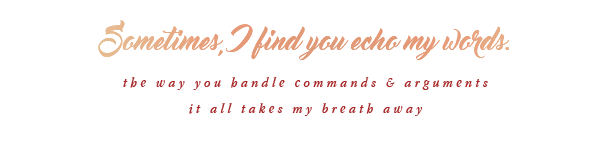
<style>
.page{position:relative;width:600px;height:150px;background:#ffffff}
.page>*{position:absolute;margin:0}
.t1{font:27.1px "MasterOfBreak";color:#e0a886}
.t2{font:14px/26.5px "AppleGaramond-Italic";letter-spacing:0.26em;color:#a82a2a}
</style>
<div class="page">
<p class="t1" style="left:98px;top:20px;width:411px;height:40px">Sometimes, I find you echo my words.</p>
<p class="t1" style="left:98px;top:20px;width:411px;height:40px">Sometimes, I find you echo my words.</p>
<p class="t2" style="left:123px;top:77px;width:365px;height:39px;text-align:center">the way you handle commands &amp; arguments<br>it all takes my breath away</p>
</div>
